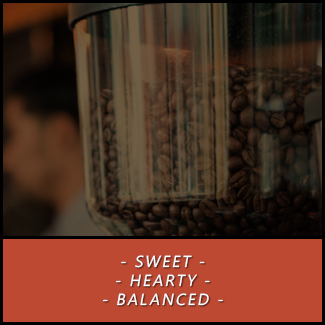
<style>
.page{position:relative;width:325px;height:325px;background:#bd4932}
.page>*{position:absolute;margin:0}
.t1{font:16px "SegoeUI";letter-spacing:0.12em;color:#ffffff;font-variant:small-caps;font-style:italic}
</style>
<div class="page">
<p class="t1" style="left:103px;top:255px;width:120px;height:51px;text-align:center">- SWEET -<br>- HEARTY -<br>- BALANCED -</p>
</div>
